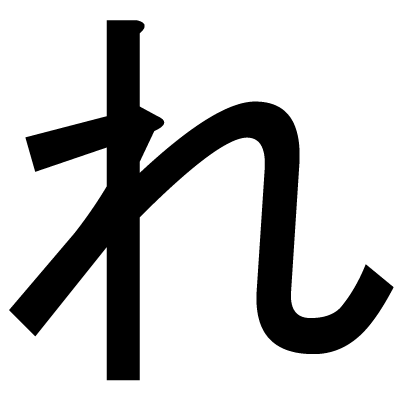
<style>
.page{position:relative;width:400px;height:400px;background:#ffffff}
.page>*{position:absolute;margin:0}
.t1{font:416.7px "MS-PGothic";color:#000000}
</style>
<div class="page">
<p class="t1" style="left:9px;top:20px;width:385px;height:361px">れ</p>
</div>
